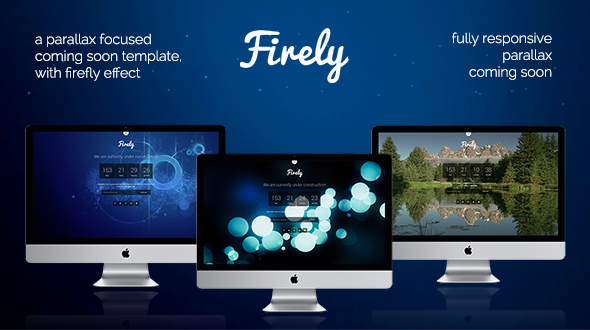
<style>
.page{position:relative;width:590px;height:330px}
.page>*{position:absolute;margin:0}
.t1{font:14px "Raleway-Light";color:#ffffff}
</style>
<div class="page">
<p class="t1" style="left:35px;top:33px;width:146px;height:48px">a parallax focused<br>coming soon template,<br>with firefly effect</p>
<p class="t1" style="left:452px;top:32px;width:100px;height:48px;text-align:right">fully responsive<br>parallax<br>coming soon</p>
</div>
